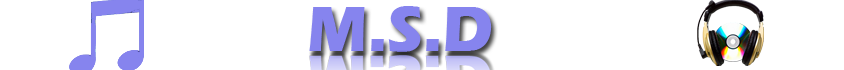
<style>
.page{position:relative;width:844px;height:70px;background:#ffffff}
.page>*{position:absolute;margin:0}
.t1{font:65.6px "ErasITC-Bold";color:#8684ee}
</style>
<div class="page">
<p class="t1" style="left:309px;top:6px;width:183px;height:46px">M.S.D</p>
</div>
